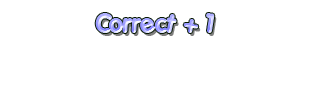
<style>
.page{position:relative;width:320px;height:100px;background:#ffffff}
.page>*{position:absolute;margin:0}
.t1{font:25px "Porkys"}
</style>
<div class="page">
<p class="t1" style="left:95px;top:13px;width:120px;height:20px">Correct + 1</p>
</div>
